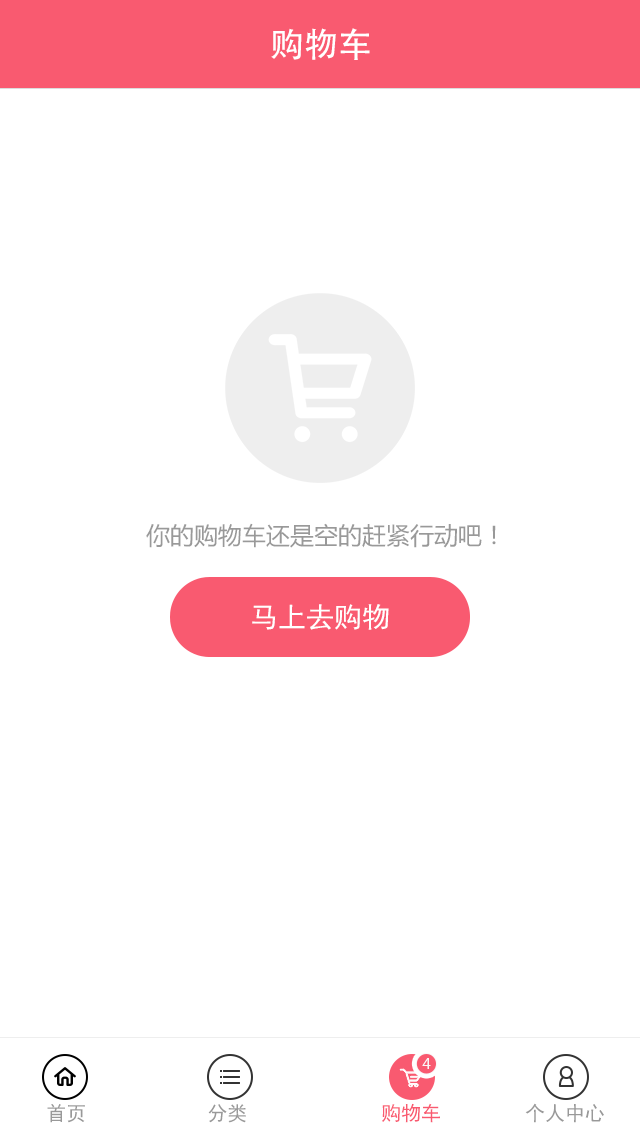
<style>
.page{position:relative;width:640px;height:1136px;background:#ffffff}
.page>*{position:absolute;margin:0}
.t1{font:34px "AdobeHeitiStd-Regular";color:#ffffff}
.t2{font:24px "MicrosoftYaHei";color:#999999}
.t3{font:28px "SimHei";color:#ffffff}
.t4{font:16.8px "MyriadPro-Regular";color:#f8f8f8}
.t5{font:20px "SimHei";color:#999999}
.t6{font:20px "SimHei";color:#f95a70}
</style>
<div class="page">
<p class="t1" style="left:271px;top:28px;width:99px;height:32px">购物车</p>
<p class="t2" style="left:146px;top:523px;width:350px;height:25px">你的购物车还是空的赶紧行动吧！</p>
<p class="t3" style="left:252px;top:604px;width:137px;height:26px">马上去购物</p>
<p class="t4" style="left:422px;top:1058px;width:9px;height:11px">4</p>
<p class="t5" style="left:47px;top:1104px;width:38px;height:19px">首页</p>
<p class="t5" style="left:208px;top:1104px;width:38px;height:19px">分类</p>
<p class="t6" style="left:382px;top:1103px;width:58px;height:20px">购物车</p>
<p class="t5" style="left:525px;top:1103px;width:79px;height:20px">个人中心</p>
</div>
